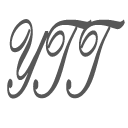
<style>
.page{position:relative;width:128px;height:128px;background:#ffffff}
.page>*{position:absolute;margin:0}
.t1{font:113.1px "KunstlerScript";color:#575757;font-weight:bold;scale:0.42 1}
</style>
<div class="page">
<p class="t1" style="left:7px;top:19px;width:118px;height:80px">YTT</p>
</div>
